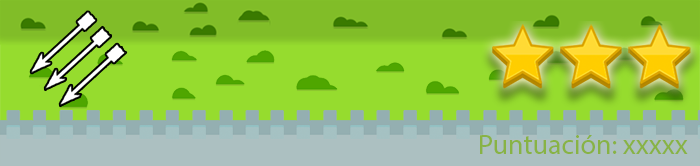
<style>
.page{position:relative;width:700px;height:166px;background:#96dc2e}
.page>*{position:absolute;margin:0}
.t1{font:28px "MyriadPro-Regular";color:#88b345}
</style>
<div class="page">
<p class="t1" style="left:480px;top:135px;width:208px;height:19px">Puntuación: xxxxx</p>
</div>
